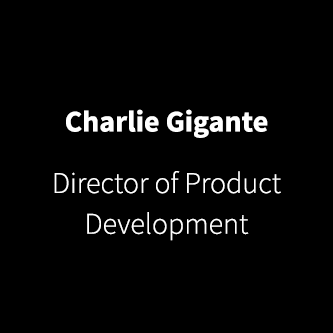
<style>
.page{position:relative;width:333px;height:333px;background:#000000}
.page>*{position:absolute;margin:0}
.t1{font:29.9px "SourceSansPro-Bold";color:#ffffff}
.t2{font:29.9px/40.7px "SourceSansPro-Light";color:#ffffff}
</style>
<div class="page">
<p class="t1" style="left:66px;top:109px;width:202px;height:29px">Charlie Gigante</p>
<p class="t2" style="left:54px;top:171px;width:227px;height:70px;text-align:center">Director of Product Development</p>
</div>
